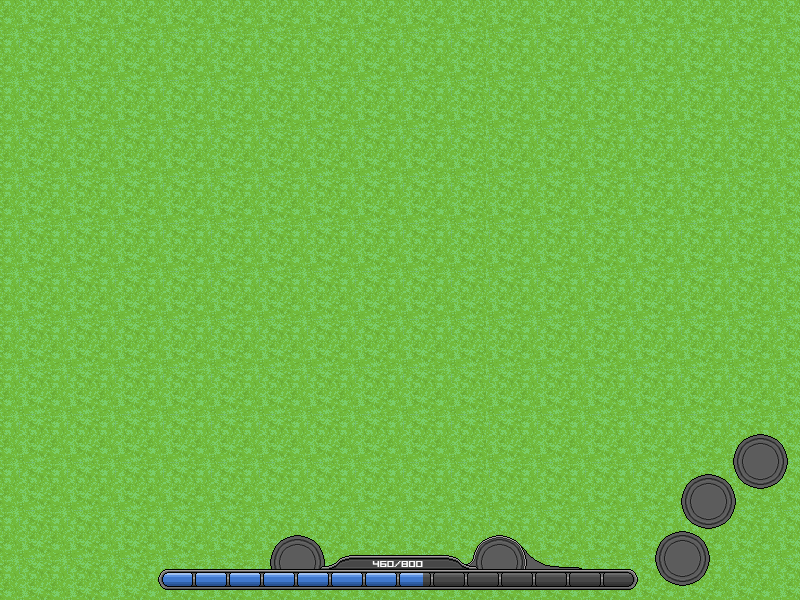
<style>
.page{position:relative;width:800px;height:600px;background:#72ba3b}
.page>*{position:absolute;margin:0}
.t1{font:12px "VisitorTT1BRK";color:#ffffff}
</style>
<div class="page">
<p class="t1" style="left:372px;top:561px;width:51px;height:6px">460/800</p>
</div>
